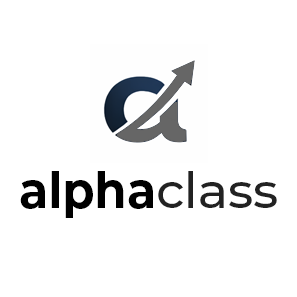
<style>
.page{position:relative;width:297px;height:297px;background:#ffffff}
.page>*{position:absolute;margin:0}
.t1{font:50px "Montserrat-Bold";color:#000000;scale:0.94 1}
.t2{font:50px "Montserrat-Medium";color:#222222}
</style>
<div class="page">
<p class="t1" style="left:20px;top:171px;width:257px;height:47px">alpha<span class="t2">class</span></p>
</div>
